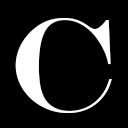
<style>
.page{position:relative;width:128px;height:128px;background:#000000}
.page>*{position:absolute;margin:0}
.t1{font:133.3px "EngraversMT";color:#ffffff}
</style>
<div class="page">
<p class="t1" style="left:15px;top:18px;width:97px;height:95px">C</p>
</div>
